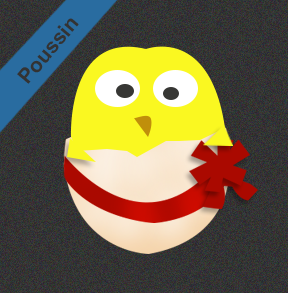
<style>
.page{position:relative;width:288px;height:293px}
.page>*{position:absolute;margin:0}
.t1{font:20.8px "Arial-BoldMT";color:#333333}
</style>
<div class="page">
<p class="t1" style="left:17px;top:18px;width:62px;height:66px;rotate:-50deg">Poussin</p>
</div>
